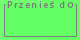
<style>
.page{position:relative;width:80px;height:40px;background:#64ff64}
.page>*{position:absolute;margin:0}
.t1{font:9.6px "MyriadPro-Regular";letter-spacing:0.2em;color:#7c7c7c}
.t2{font:12.5px "MyriadPro-Regular";letter-spacing:0.2em;color:#7c7c7c}
</style>
<div class="page">
<p class="t1" style="left:7px;top:1px;width:67px;height:7px">Przenieś d<span class="t2">o</span></p>
</div>
